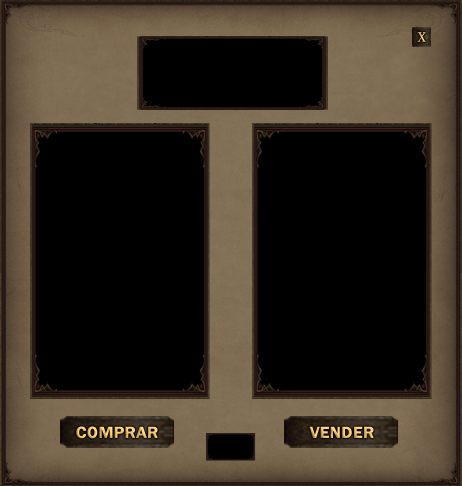
<style>
.page{position:relative;width:462px;height:486px;background:#000000}
.page>*{position:absolute;margin:0}
.t1{font:13.9px "TimesNewRomanPSMT";color:#f2c366;text-transform:uppercase;font-weight:bold;scale:0.8 1}
.t2{font:16.7px "FranklinGothic-Demi";scale:1.07 1}
</style>
<div class="page">
<p class="t1" style="left:417px;top:32px;width:9px;height:10px">X</p>
<p class="t2" style="left:76px;top:426px;width:82px;height:13px">COMPRAR</p>
<p class="t2" style="left:309px;top:426px;width:65px;height:12px">VENDER</p>
</div>
